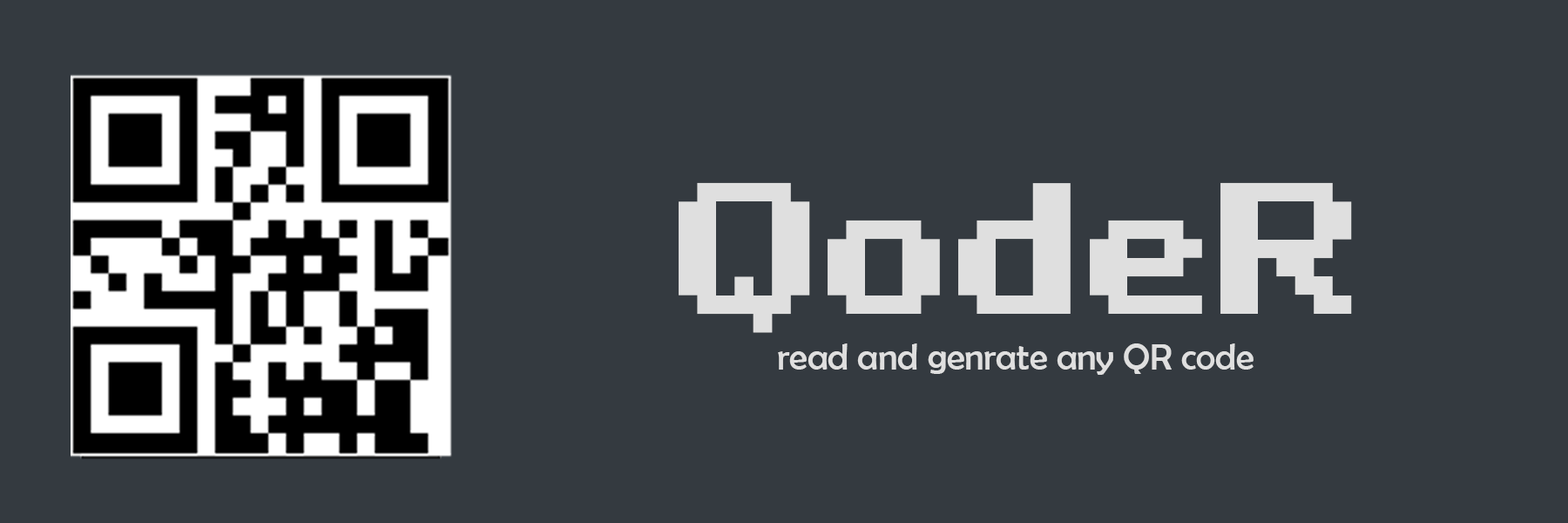
<style>
.page{position:relative;width:1568px;height:523px;background:#343a40}
.page>*{position:absolute;margin:0}
.t1{font:187.2px "Bit-Darling10-(sRB)";color:#dfdfdf}
.t2{font:36.7px "BerlinSansFB-Reg";color:#dfdfdf}
</style>
<div class="page">
<p class="t1" style="left:679px;top:182px;width:673px;height:151px">QodeR</p>
<p class="t2" style="left:778px;top:343px;width:476px;height:32px">read and genrate any QR code</p>
</div>
